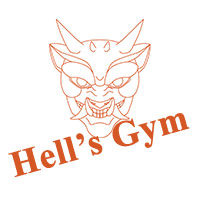
<style>
.page{position:relative;width:200px;height:200px;background:#ffffff}
.page>*{position:absolute;margin:0}
.t1{font:36px "TimesNewRomanPS-BoldMT";color:#d65726;font-weight:bold}
</style>
<div class="page">
<p class="t1" style="left:8px;top:113px;width:182px;height:64px;rotate:-16deg">Hell’s Gym</p>
</div>
